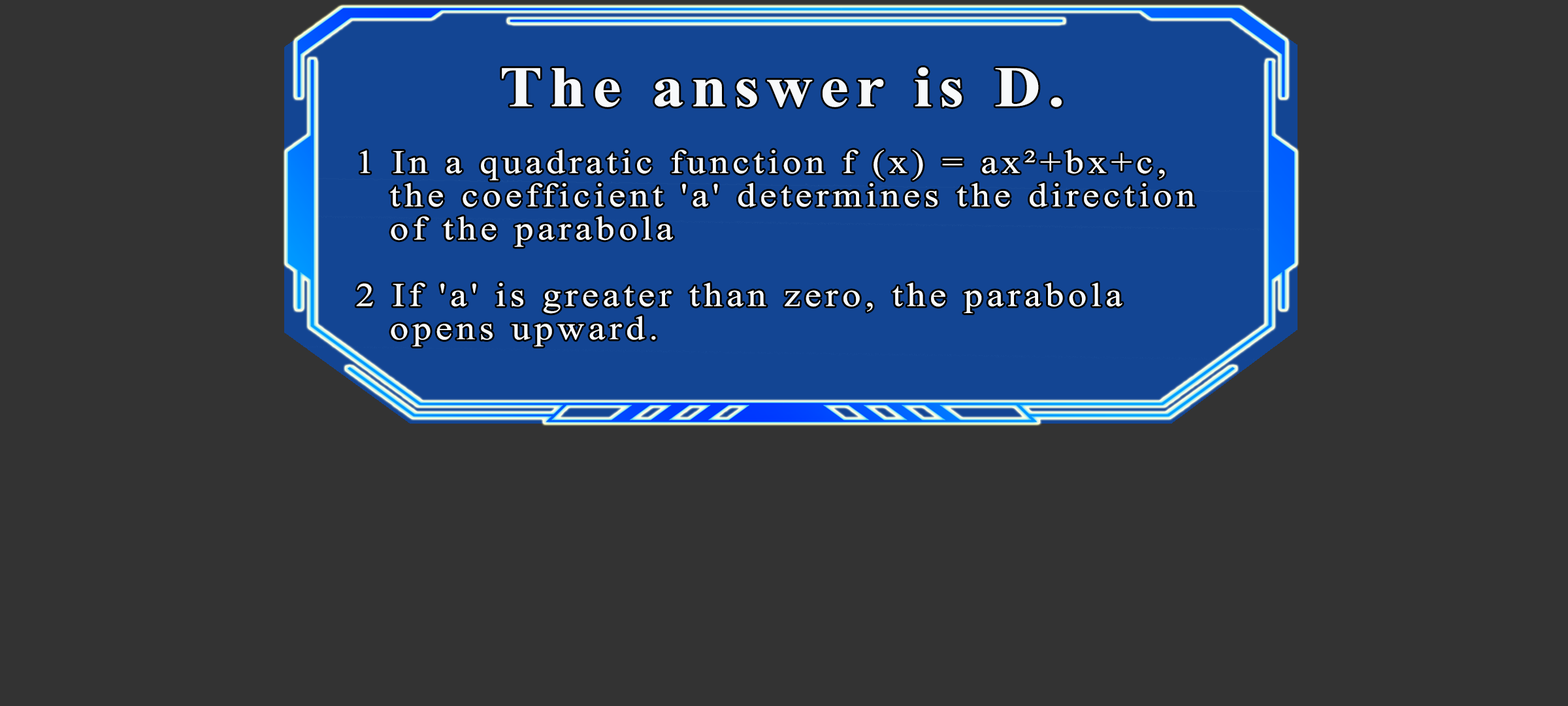
<style>
.page{position:relative;width:1568px;height:706px;background:#333333}
.page>*{position:absolute;margin:0}
.t1{font:57.2px "TimesNewRomanPS-BoldMT";letter-spacing:0.115em;color:#f7f9fb;scale:1.12 1}
.t2{font:33.2px/33.2px "TimesNewRomanPSMT";letter-spacing:0.115em;color:#f7f9fb;scale:1.12 1}
</style>
<div class="page">
<p class="t1" style="left:502px;top:67px;width:560px;height:40px">The answer is D.</p>
<p class="t2" style="left:356px;top:150px;width:839px;height:196px">1 In a quadratic function f (x) = ax²+bx+c,<br>  the coefficient 'a' determines the direction<br>  of the parabola<br><br>2 If 'a' is greater than zero, the parabola<br>  opens upward.</p>
</div>
